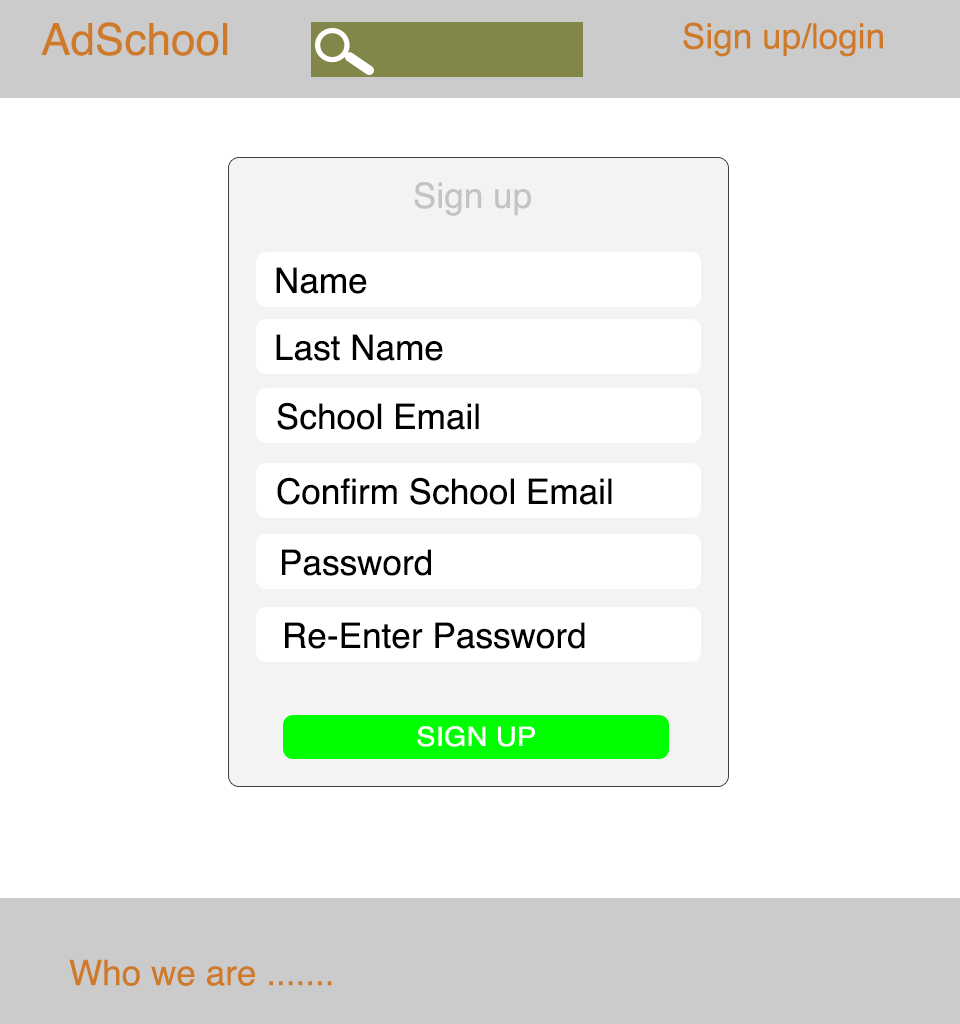
<style>
.page{position:relative;width:960px;height:1024px;background:#ffffff}
.page>*{position:absolute;margin:0}
.t1{font:44px "Helvetica";color:#cf7a29}
.t2{font:35.1px "Helvetica";color:#cf7a29}
.t3{font:35.1px "Helvetica";color:#c3c3c3}
.t4{font:35.1px "Helvetica";color:#000000}
.t5{font:26.7px "Helvetica";color:#ffffff;scale:1.09 1}
</style>
<div class="page">
<p class="t1" style="left:41px;top:22px;width:187px;height:34px">AdSchool</p>
<p class="t2" style="left:683px;top:22px;width:200px;height:35px">Sign up/login</p>
<p class="t3" style="left:414px;top:182px;width:117px;height:34px">Sign up</p>
<p class="t4" style="left:276px;top:267px;width:91px;height:27px">Name</p>
<p class="t4" style="left:276px;top:334px;width:167px;height:27px">Last Name</p>
<p class="t4" style="left:277px;top:402px;width:202px;height:28px">School Email</p>
<p class="t4" style="left:277px;top:477px;width:335px;height:28px">Confirm School Email</p>
<p class="t4" style="left:282px;top:549px;width:149px;height:27px">Password</p>
<p class="t4" style="left:285px;top:622px;width:300px;height:27px">Re-Enter Password</p>
<p class="t5" style="left:417px;top:726px;width:118px;height:21px">SIGN UP</p>
<p class="t2" style="left:69px;top:959px;width:263px;height:27px">Who we are .......</p>
</div>
